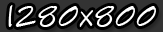
<style>
.page{position:relative;width:163px;height:32px;background:#000000}
.page>*{position:absolute;margin:0}
.t1{font:33.3px "SketchFlowPrint";color:#ffffff}
</style>
<div class="page">
<p class="t1" style="left:8px;top:5px;width:148px;height:22px">1280x800</p>
</div>
